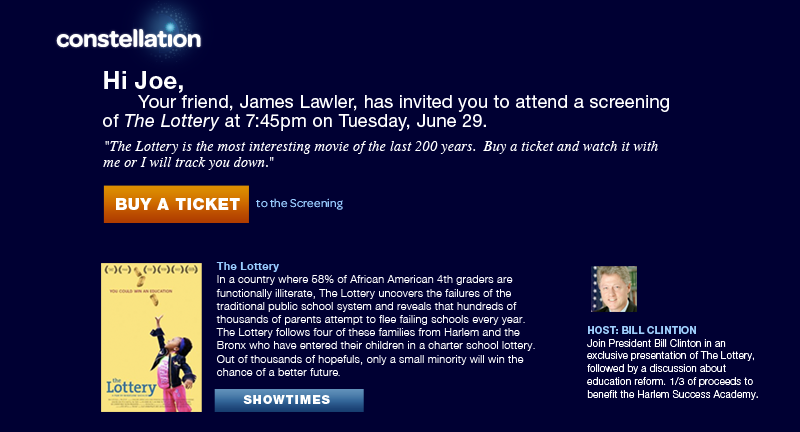
<style>
.page{position:relative;width:800px;height:432px;background:#000033}
.page>*{position:absolute;margin:0}
.t1{font:18px/19px "HelveticaNeue-Roman";letter-spacing:0.02em;color:#ffffff}
.t2{font:24px/19px "HelveticaNeue-Bold";letter-spacing:0.02em;color:#ffffff}
.t3{font:18px/19px "HelveticaNeue-Italic";letter-spacing:0.02em;color:#ffffff}
.t4{font:14px/16.3px "Times-Italic";letter-spacing:0.02em;color:#ffffff}
.t5{font:16.3px "HelveticaNeue-Black";letter-spacing:0.02em;color:#ffffff;text-transform:uppercase}
.t6{font:12px "Omnes-Regular";letter-spacing:0.02em;color:#99ccff}
.t7{font:12px "Omnes-Regular";letter-spacing:0.02em;color:#99ccff;text-transform:uppercase}
.t8{font:11px "HelveticaNeue-Light";letter-spacing:0.02em;color:#ffffff}
.t9{font:11px "HelveticaNeue-Bold";letter-spacing:0.02em;color:#99ccff}
.t10{font:11px "Omnes-Light";letter-spacing:0.02em;color:#ffffff}
.t11{font:10px/12.8px "HelveticaNeue-Light";letter-spacing:0.02em;color:#ffffff}
.t12{font:10px/18.8px "HelveticaNeue-Bold";letter-spacing:0.02em;color:#9ecefb;text-transform:uppercase}
.t13{font:12px/12.8px "HelveticaNeue-Light";letter-spacing:0.02em;color:#ffffff}
.t14{font:12px "HelveticaNeue-Black";letter-spacing:0.08em;color:#ffffff;text-transform:uppercase}
</style>
<div class="page">
<p class="t1" style="left:103px;top:71px;width:566px;height:60px"><span class="t2">Hi Joe,<br></span> Your friend, James Lawler, has invited you to attend a screening <br>of <span class="t3">The Lottery </span>at 7:45pm on Tuesday, June 29.</p>
<p class="t4" style="left:103px;top:141px;width:555px;height:29px">"The Lottery is the most interesting movie of the last 200 years.  Buy a ticket and watch it with me or I will track you down."</p>
<p class="t5" style="left:116px;top:198px;width:124px;height:12px">buy a ticket</p>
<p class="t6" style="left:256px;top:198px;width:87px;height:12px">to the<span class="t7"> s</span>creening</p>
<p class="t8" style="left:216px;top:262px;width:319px;height:115px"><span class="t9">The Lottery<br></span>In a country where 58% of African American 4th graders are functionally illiterate, The Lottery uncovers the failures of the traditional public school system and reveals that hundreds of thousands of parents attempt to flee failing schools every year.<br>The Lottery follows four of these families from Harlem and the Bronx who have entered their children in a charter school lottery. Out of thousands of hopefuls, only a small minority will win the chance of a better future<span class="t10">.</span></p>
<p class="t11" style="left:587px;top:326px;width:171px;height:74px"><span class="t12">host: bill clintion<br></span>Join President Bill Clinton in an exclusive presentation of The Lottery, followed by a discussion about education reform. 1/3 of proceeds to benefit the Harlem Success Academy<span class="t13">.</span></p>
<p class="t14" style="left:243px;top:395px;width:87px;height:9px">showtimes</p>
</div>
